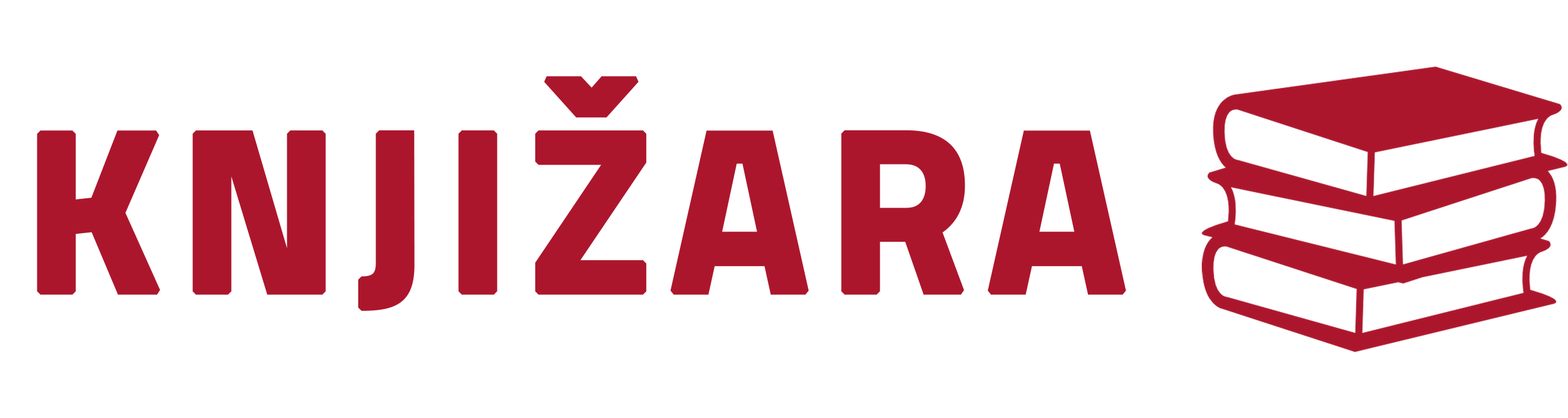
<style>
.page{position:relative;width:1568px;height:418px;background:#ffffff}
.page>*{position:absolute;margin:0}
.t1{font:231.9px "Titillium-Bold";letter-spacing:0.05em;color:#ac162c;text-transform:uppercase;font-weight:bold}
</style>
<div class="page">
<p class="t1" style="left:37px;top:76px;width:1089px;height:235px">Knjižara</p>
</div>
